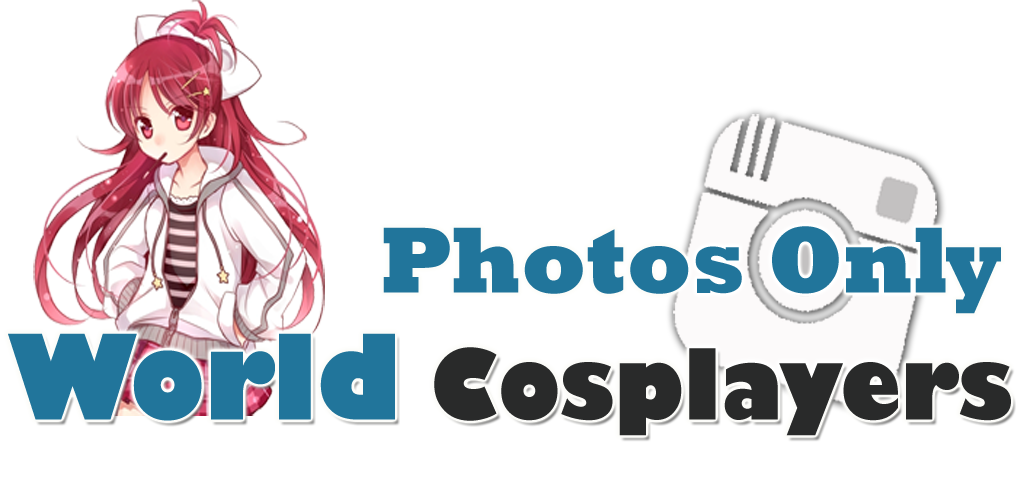
<style>
.page{position:relative;width:1024px;height:500px;background:#ffffff}
.page>*{position:absolute;margin:0}
.t1{font:95.5px "Rockwell-ExtraBold";color:#21759b;scale:0.91 1}
.t2{font:95.5px "GillSans-UltraBold";color:#292a2a;scale:0.91 1}
.t3{font:114.6px "GillSans-UltraBold";color:#21759b;scale:0.91 1}
</style>
<div class="page">
<p class="t1" style="left:383px;top:226px;width:618px;height:88px">Photos Only</p>
<p class="t2" style="left:8px;top:333px;width:1003px;height:103px"><span class="t3">World </span>Cosplayers</p>
</div>
